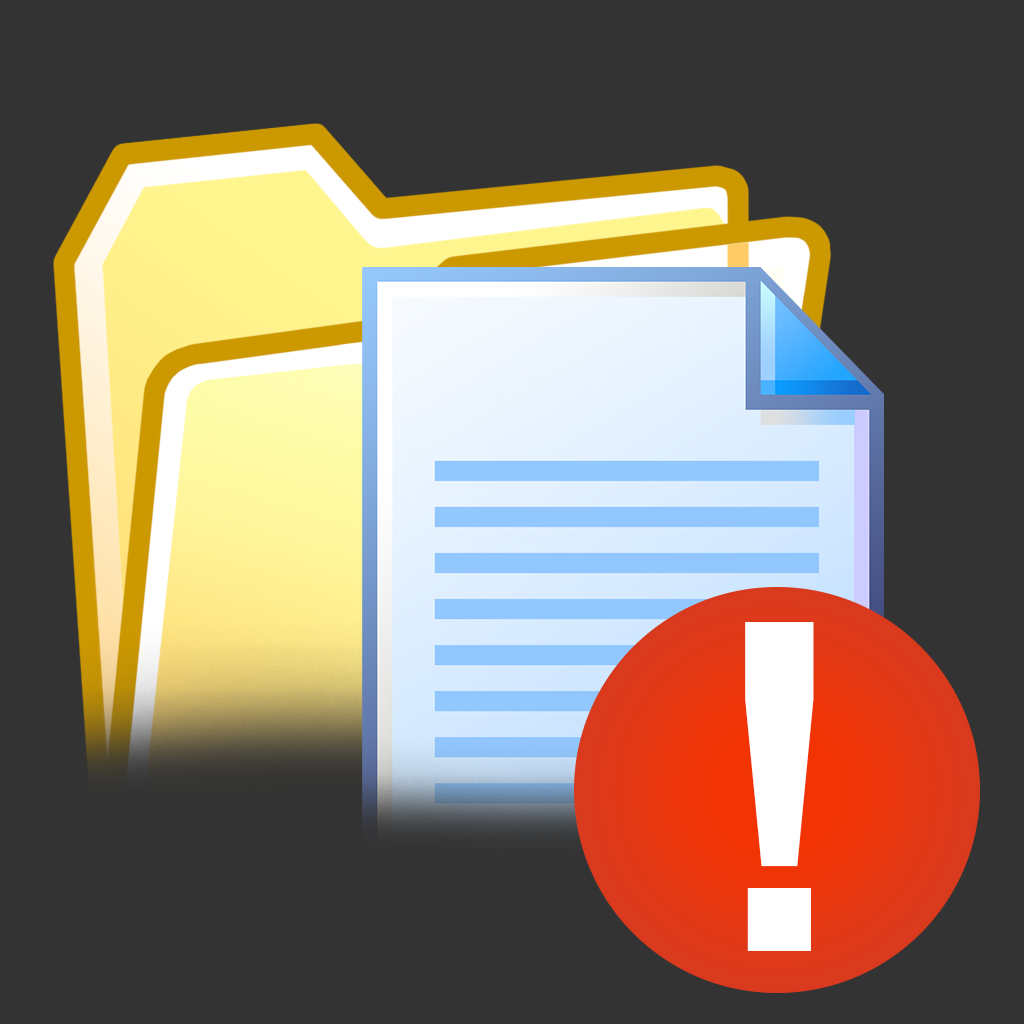
<style>
.page{position:relative;width:1024px;height:1024px;background:#333333}
.page>*{position:absolute;margin:0}
.t1{font:458.8px "Arial-BoldMT";letter-spacing:-0.025em;color:#ffffff}
</style>
<div class="page">
<p class="t1" style="left:745px;top:622px;width:69px;height:329px">!</p>
</div>
